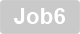
<style>
.page{position:relative;width:80px;height:34px;background:#c9c9c9}
.page>*{position:absolute;margin:0}
.t1{font:22.1px "Arial-BoldMT";color:#ffffff}
</style>
<div class="page">
<p class="t1" style="left:14px;top:8px;width:51px;height:16px">Job6</p>
</div>
